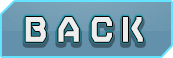
<style>
.page{position:relative;width:173px;height:58px;background:#6391ab}
.page>*{position:absolute;margin:0}
.t1{font:33.5px "VoyagerGrotesqueBold";letter-spacing:0.3em;color:#ffffff}
</style>
<div class="page">
<p class="t1" style="left:25px;top:17px;width:118px;height:25px">BACK</p>
</div>
